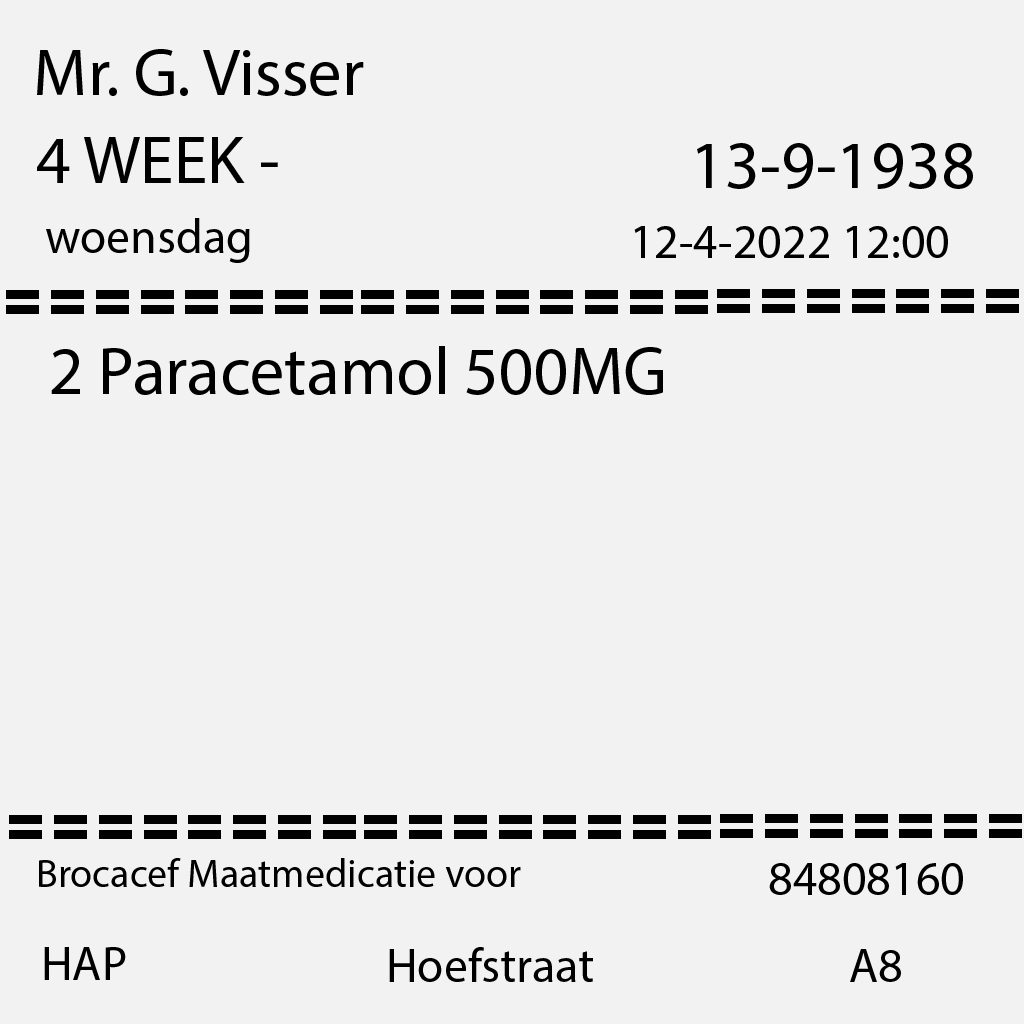
<style>
.page{position:relative;width:1024px;height:1024px;background:#f2f2f2}
.page>*{position:absolute;margin:0}
.t1{font:67px "MyriadPro-Regular";color:#000000}
.t2{font:68px "MyriadPro-Regular";color:#000000}
.t3{font:48px "MyriadPro-Regular";color:#000000}
.t4{font:40px "MyriadPro-Regular";color:#000000}
</style>
<div class="page">
<p class="t1" style="left:37px;top:49px;width:327px;height:47px">Mr. G. Visser</p>
<p class="t2" style="left:37px;top:137px;width:241px;height:46px">4 WEEK -</p>
<p class="t2" style="left:697px;top:143px;width:276px;height:46px">13-9-1938</p>
<p class="t3" style="left:46px;top:218px;width:204px;height:45px">woensdag</p>
<p class="t3" style="left:634px;top:226px;width:314px;height:32px">12-4-2022 12:00</p>
<p class="t2" style="left:51px;top:346px;width:612px;height:49px">2 Paracetamol 500MG</p>
<p class="t4" style="left:39px;top:858px;width:482px;height:29px">Brocacef Maatmedicatie voor</p>
<p class="t3" style="left:769px;top:863px;width:194px;height:32px">84808160</p>
<p class="t3" style="left:44px;top:947px;width:82px;height:33px">HAP</p>
<p class="t3" style="left:389px;top:947px;width:204px;height:35px">Hoefstraat</p>
<p class="t3" style="left:850px;top:949px;width:51px;height:33px">A8</p>
</div>
